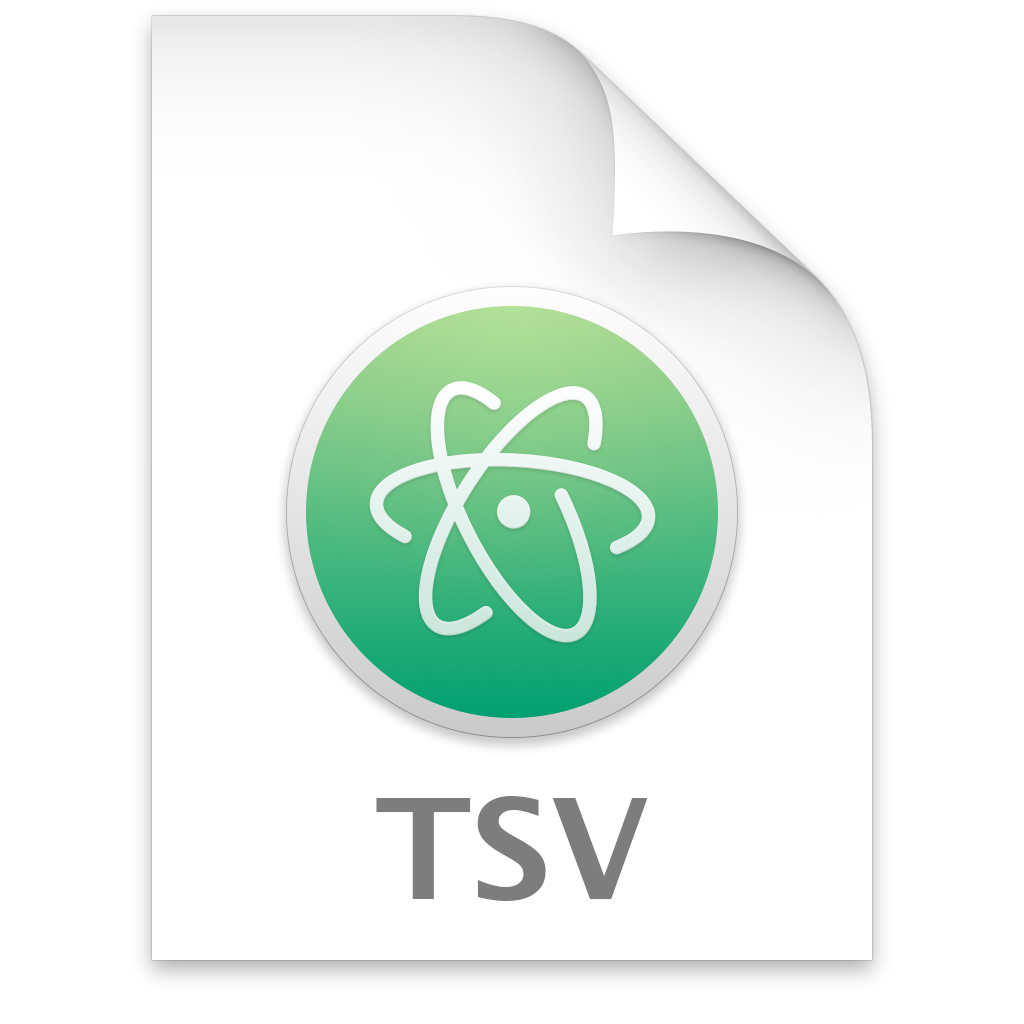
<style>
.page{position:relative;width:1024px;height:1024px;background:#ffffff}
.page>*{position:absolute;margin:0}
.t1{font:140px "LucidaGrande-Bold";color:#7d7d7d}
</style>
<div class="page">
<p class="t1" style="left:376px;top:796px;width:272px;height:105px">TSV</p>
</div>
